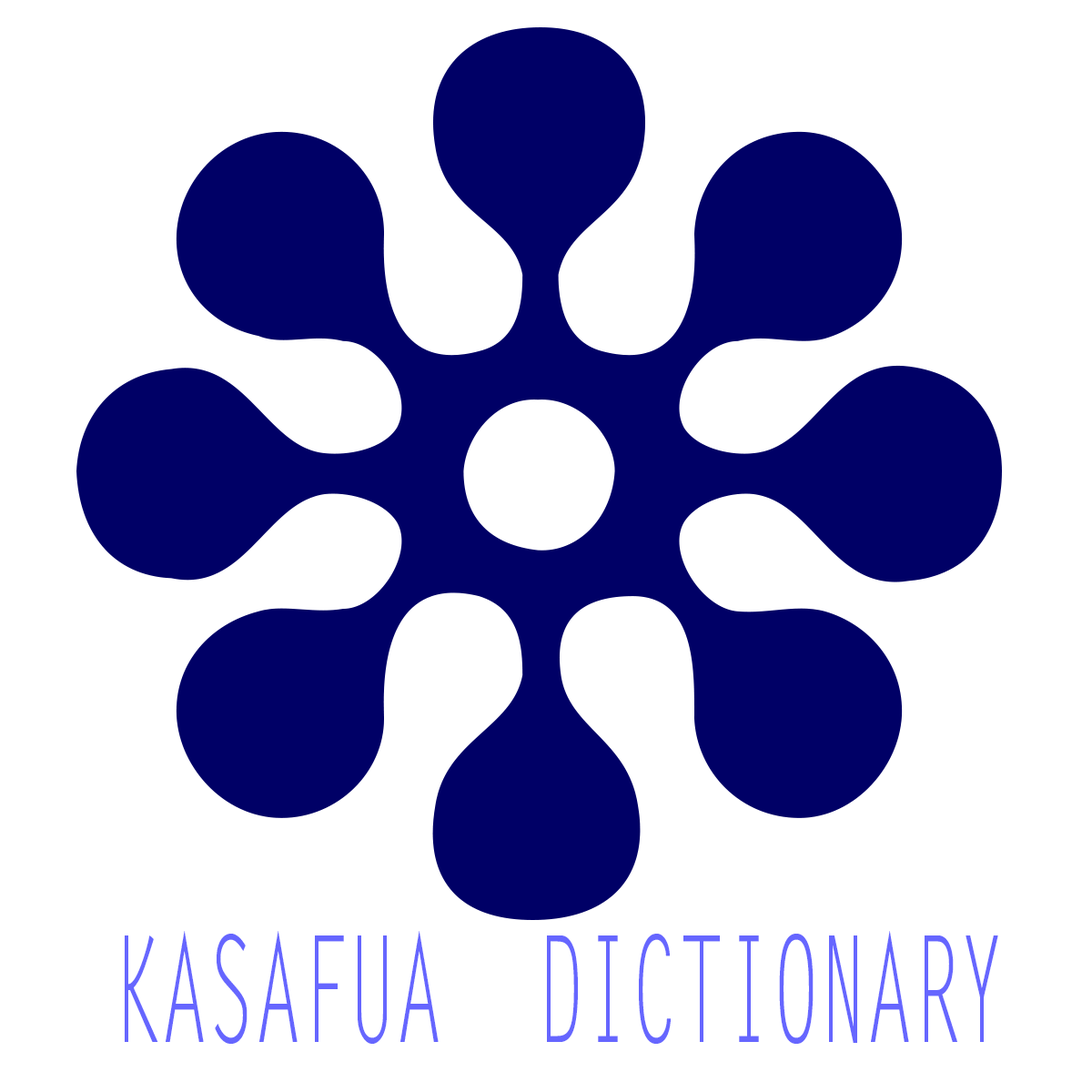
<style>
.page{position:relative;width:1092px;height:1092px;background:#ffffff}
.page>*{position:absolute;margin:0}
.t1{font:148.2px "LetterGothicStd";color:#6666ff;scale:0.53 1}
</style>
<div class="page">
<p class="t1" style="left:125px;top:931px;width:873px;height:113px">KASAFUA  DICTIONARY</p>
</div>
